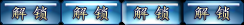
<style>
.page{position:relative;width:244px;height:25px}
.page>*{position:absolute;margin:0}
.t1{font:15.8px "ç»å¸æ¥·ä½ç®-regular";letter-spacing:0.25em;scale:1.08 1}
</style>
<div class="page">
<p class="t1" style="left:12px;top:6px;width:35px;height:14px">解锁</p>
<p class="t1" style="left:73px;top:6px;width:35px;height:14px">解锁</p>
<p class="t1" style="left:134px;top:6px;width:35px;height:14px">解锁</p>
<p class="t1" style="left:194px;top:6px;width:36px;height:14px">解锁</p>
</div>
